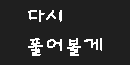
<style>
.page{position:relative;width:130px;height:65px;background:#1f1f1f}
.page>*{position:absolute;margin:0}
.t1{font:24px "GabiaSolmee";color:#ffffff}
</style>
<div class="page">
<p class="t1" style="left:28px;top:10px;width:74px;height:46px">다시 <br>풀어볼게</p>
</div>
